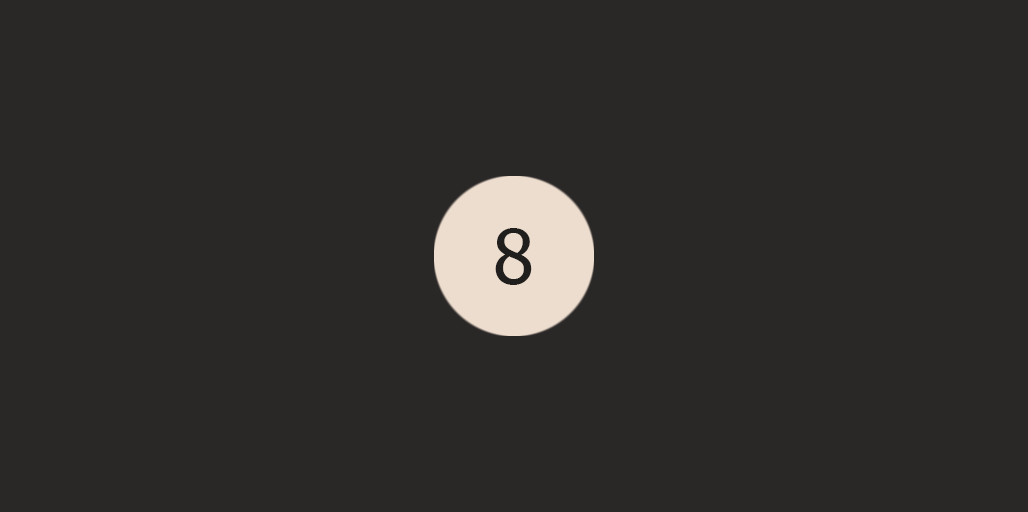
<style>
.page{position:relative;width:1028px;height:512px;background:#2a2727}
.page>*{position:absolute;margin:0}
.t1{font:75px "Tahoma";color:#211e1e}
</style>
<div class="page">
<p class="t1" style="left:495px;top:228px;width:37px;height:57px">8</p>
</div>
